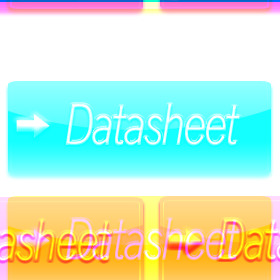
<style>
.page{position:relative;width:280px;height:280px;background:#ffffff}
.page>*{position:absolute;margin:0}
.t1{font:55px "NewsGothicMT-Italic";letter-spacing:-0.075em;scale:0.81 1}
</style>
<div class="page">
<p class="t1" style="left:65px;top:102px;width:175px;height:42px">Datasheet</p>
</div>
